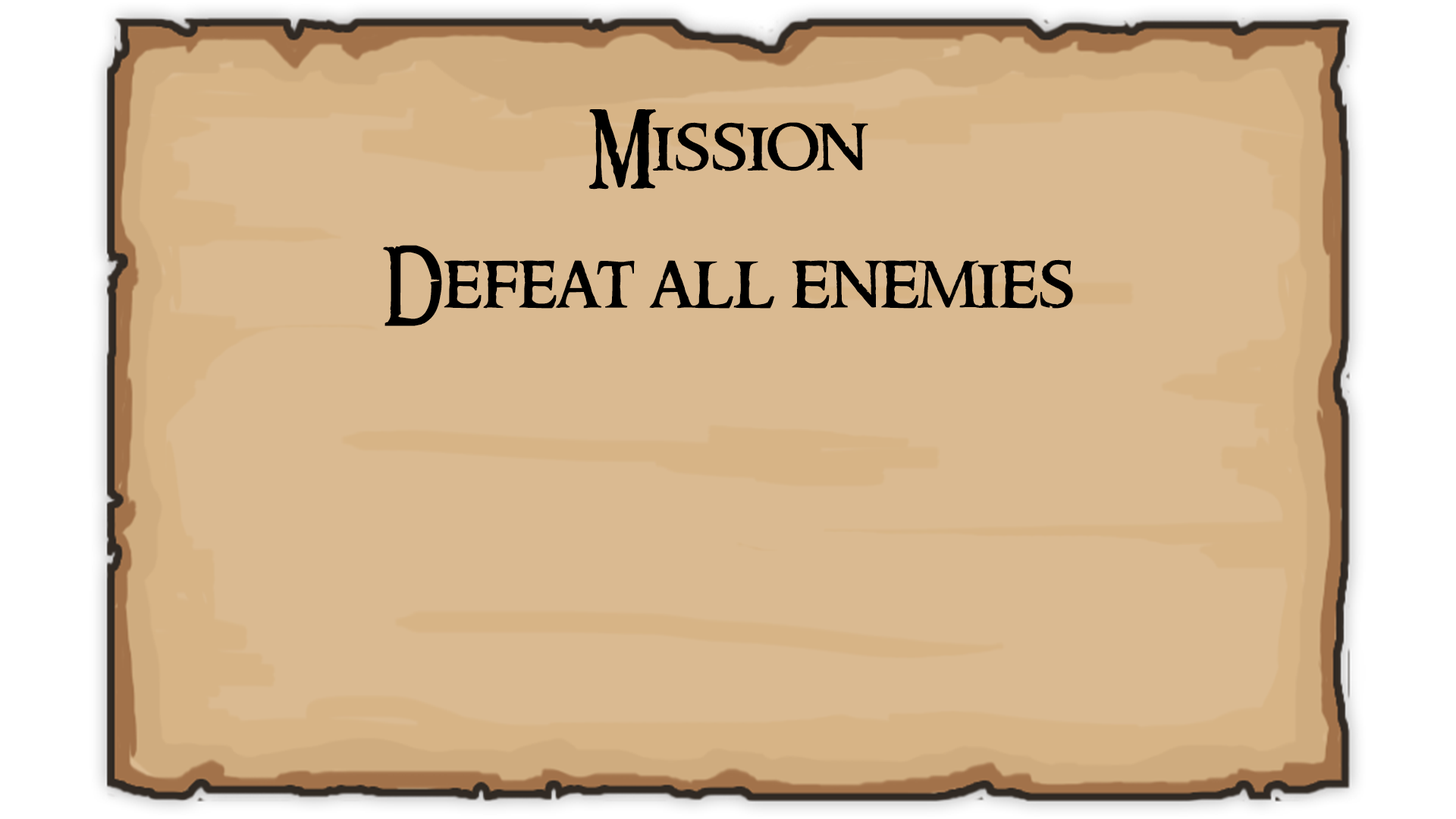
<style>
.page{position:relative;width:1456px;height:819px;background:#daba91}
.page>*{position:absolute;margin:0}
.t1{font:75.8px "RingbearerMedium";color:#000000}
</style>
<div class="page">
<p class="t1" style="left:588px;top:109px;width:280px;height:81px">Mission</p>
<p class="t1" style="left:383px;top:245px;width:690px;height:81px">Defeat all enemies</p>
</div>
